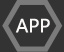
<style>
.page{position:relative;width:64px;height:52px;background:#333333}
.page>*{position:absolute;margin:0}
.t1{font:18px "MicrosoftYaHei";color:#faf7f7}
</style>
<div class="page">
<p class="t1" style="left:15px;top:18px;width:35px;height:15px">APP</p>
</div>
